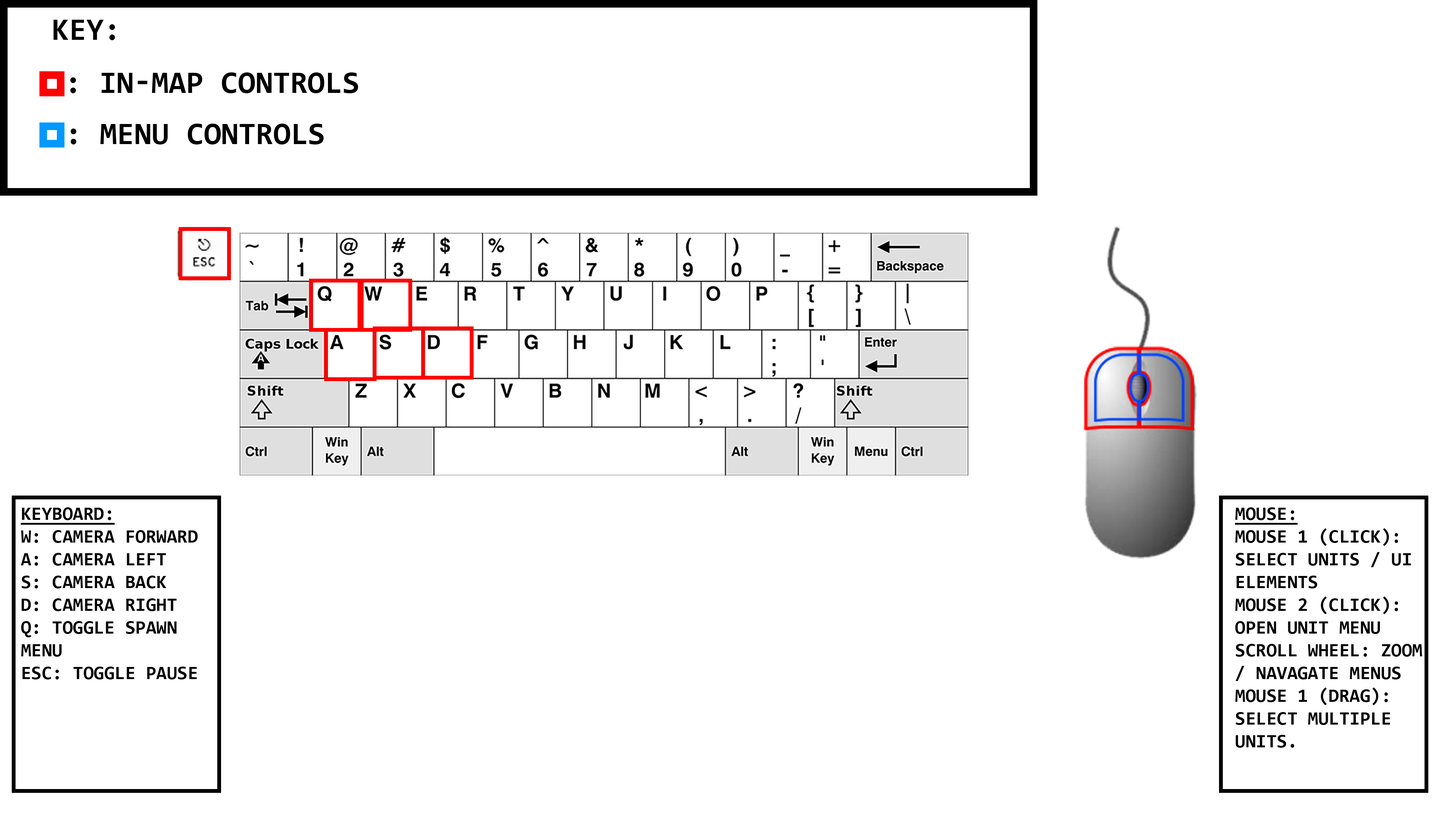
<style>
.page{position:relative;width:1456px;height:819px;background:#ffffff}
.page>*{position:absolute;margin:0}
.t1{font:31.6px "Consolas-Bold";color:#000000;text-transform:uppercase}
.t2{font:19px "Consolas-Bold";color:#000000;text-transform:uppercase}
.t3{font:19px "Consolas-Bold";color:#000000;text-transform:uppercase;text-decoration:underline}
</style>
<div class="page">
<p class="t1" style="left:53px;top:20px;width:62px;height:20px">Key:</p>
<p class="t1" style="left:70px;top:72px;width:288px;height:21px">: In-Map Controls</p>
<p class="t1" style="left:71px;top:124px;width:253px;height:20px">: Menu Controls</p>
<p class="t2" style="left:20px;top:507px;width:178px;height:172px"><span class="t3">Keyboard:<br></span>W: Camera Forward<br>A: Camera Left<br>S: Camera Back<br>D: Camera Right<br>Q: Toggle Spawn Menu<br>ESC: Toggle Pause</p>
<p class="t2" style="left:1235px;top:507px;width:187px;height:241px"><span class="t3">Mouse:<br></span>Mouse 1 (click):<br>Select Units / UI Elements<br>Mouse 2 (Click):<br>Open Unit Menu<br>Scroll Wheel: Zoom / navagate menus<br>Mouse 1 (Drag): Select Multiple units.</p>
</div>
